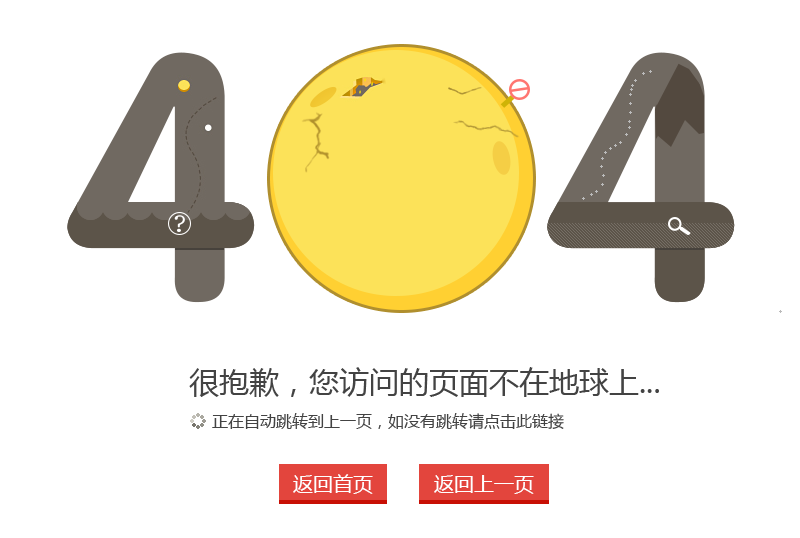
<style>
.page{position:relative;width:800px;height:538px;background:#ffffff}
.page>*{position:absolute;margin:0}
.t1{font:345.3px "FZY4JW--GB1-0";color:#706961}
.t2{font:30px "MicrosoftYaHei";color:#434343}
.t3{font:16px "MicrosoftYaHei";color:#434343}
.t4{font:20px "MicrosoftYaHei";color:#ffffff}
</style>
<div class="page">
<p class="t1" style="left:67px;top:52px;width:188px;height:251px">4</p>
<p class="t1" style="left:547px;top:52px;width:188px;height:251px">4</p>
<p class="t2" style="left:189px;top:367px;width:470px;height:30px">很抱歉，您访问的页面不在地球上...</p>
<p class="t3" style="left:212px;top:413px;width:352px;height:17px">正在自动跳转到上一页，如没有跳转请点击此链接</p>
<p class="t4" style="left:293px;top:474px;width:80px;height:20px">返回首页</p>
<p class="t4" style="left:434px;top:475px;width:100px;height:19px">返回上一页</p>
</div>
